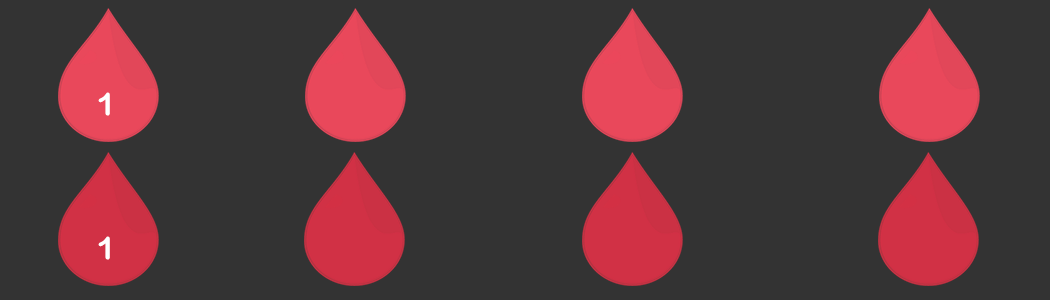
<style>
.page{position:relative;width:1050px;height:300px;background:#333333}
.page>*{position:absolute;margin:0}
.t1{font:31px "ArialRoundedMTBold";color:#ffffff}
</style>
<div class="page">
<p class="t1" style="left:98px;top:92px;width:12px;height:24px">1</p>
<p class="t1" style="left:98px;top:236px;width:12px;height:24px">1</p>
</div>
